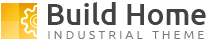
<style>
.page{position:relative;width:208px;height:40px;background:#ffffff}
.page>*{position:absolute;margin:0}
.t1{font:30px "Ubuntu-Medium";color:#434343}
.t2{font:12px "Ubuntu-Light";letter-spacing:0.28em;color:#7a7a7a;text-transform:uppercase}
</style>
<div class="page">
<p class="t1" style="left:48px;top:2px;width:158px;height:23px">Build Home</p>
<p class="t2" style="left:48px;top:31px;width:156px;height:8px">Industrial Theme</p>
</div>
